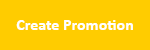
<style>
.page{position:relative;width:150px;height:50px;background:#ffcc00}
.page>*{position:absolute;margin:0}
.t1{font:16px "Calibri-Bold";color:#ffffff}
</style>
<div class="page">
<p class="t1" style="left:16px;top:20px;width:117px;height:10px">Create Promotion</p>
</div>
